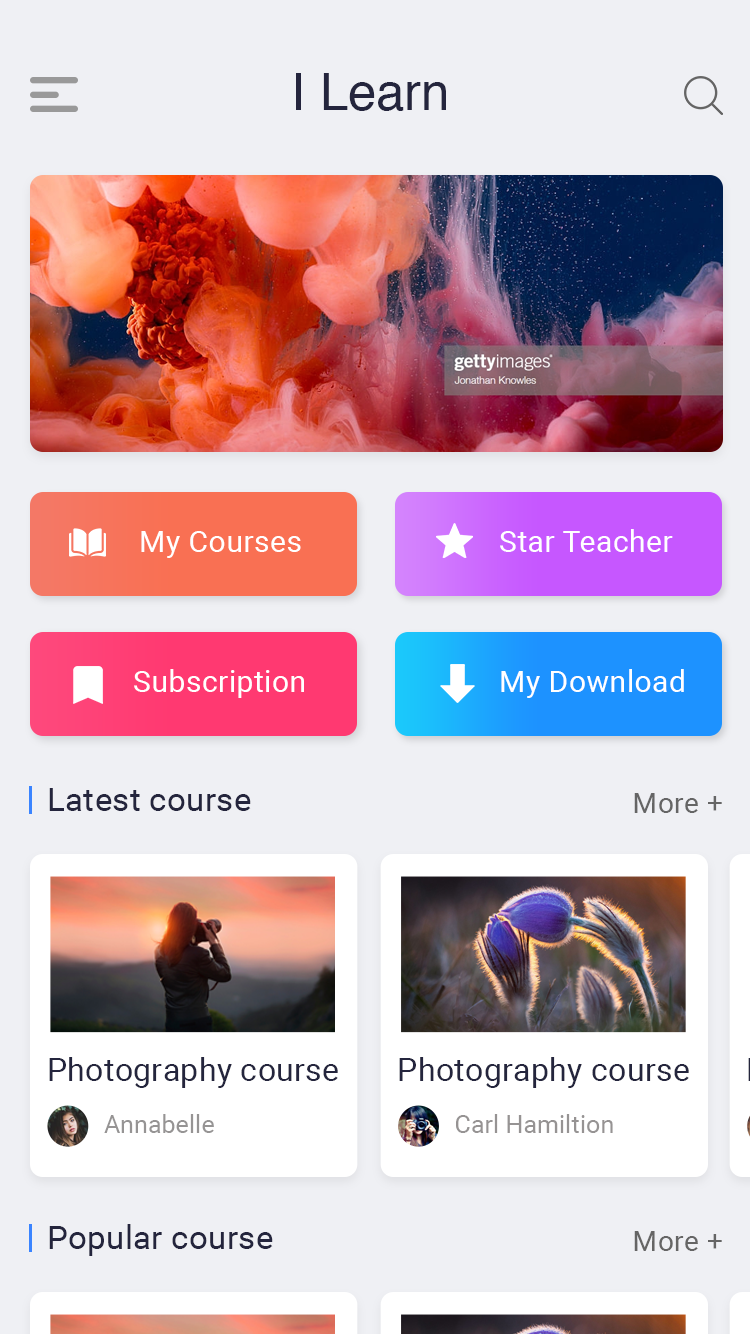
<style>
.page{position:relative;width:750px;height:1334px;background:#eff0f4}
.page>*{position:absolute;margin:0}
.t1{font:50.8px "Helvetica";color:#24253d}
.t2{font:30.5px "Roboto-Regular";letter-spacing:0.01em;color:#ffffff}
.t3{font:33px "Roboto-Regular";letter-spacing:0.01em;color:#24253d}
.t4{font:28.4px "Roboto-Regular";letter-spacing:0.01em;color:#656565}
.t5{font:32.3px "Roboto-Regular";letter-spacing:0.01em;color:#24253d}
.t6{font:24.9px "Roboto-Regular";letter-spacing:0.01em;color:#969393}
</style>
<div class="page">
<p class="t1" style="left:296px;top:73px;width:150px;height:38px">I Learn</p>
<p class="t2" style="left:141px;top:531px;width:160px;height:27px">My Courses</p>
<p class="t2" style="left:500px;top:529px;width:173px;height:23px">Star Teacher</p>
<p class="t2" style="left:134px;top:669px;width:170px;height:29px">Subscription</p>
<p class="t2" style="left:501px;top:669px;width:183px;height:29px">My Download</p>
<p class="t3" style="left:49px;top:788px;width:202px;height:23px">Latest course</p>
<p class="t4" style="left:634px;top:793px;width:88px;height:20px">More +</p>
<p class="t5" style="left:49px;top:1057px;width:289px;height:31px">Photography course</p>
<p class="t5" style="left:399px;top:1057px;width:290px;height:31px">Photography course</p>
<p class="t6" style="left:104px;top:1114px;width:110px;height:19px">Annabelle</p>
<p class="t6" style="left:456px;top:1114px;width:157px;height:19px">Carl Hamiltion</p>
<p class="t3" style="left:49px;top:1224px;width:224px;height:32px">Popular course</p>
<p class="t4" style="left:634px;top:1231px;width:88px;height:20px">More +</p>
</div>
